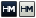
<style>
.page{position:relative;width:36px;height:18px}
.page>*{position:absolute;margin:0}
.t1{font:8.5px "GothamLight";letter-spacing:-0.1em;color:#ffffff}
.t2{font:8.5px "GothamBold";letter-spacing:-0.1em;color:#ffffff}
.t3{font:8.5px "GothamLight";letter-spacing:-0.1em;color:#0f1b2c}
.t4{font:8.5px "GothamBold";letter-spacing:-0.1em;color:#0f1b2c}
</style>
<div class="page">
<p class="t1" style="left:3px;top:6px;width:6px;height:6px">H</p>
<p class="t2" style="left:8px;top:6px;width:7px;height:6px">M</p>
<p class="t3" style="left:21px;top:6px;width:6px;height:6px">H</p>
<p class="t4" style="left:26px;top:6px;width:7px;height:6px">M</p>
</div>
